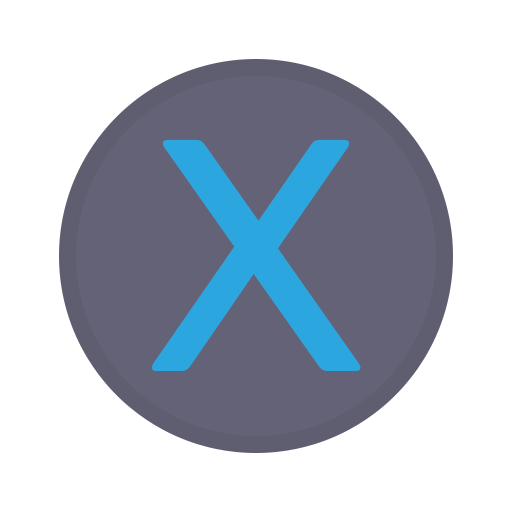
<style>
.page{position:relative;width:512px;height:512px;background:#ffffff}
.page>*{position:absolute;margin:0}
.t1{font:339.8px "Alpino-Medium";color:#2ca6df}
</style>
<div class="page">
<p class="t1" style="left:152px;top:139px;width:209px;height:232px">X</p>
</div>
